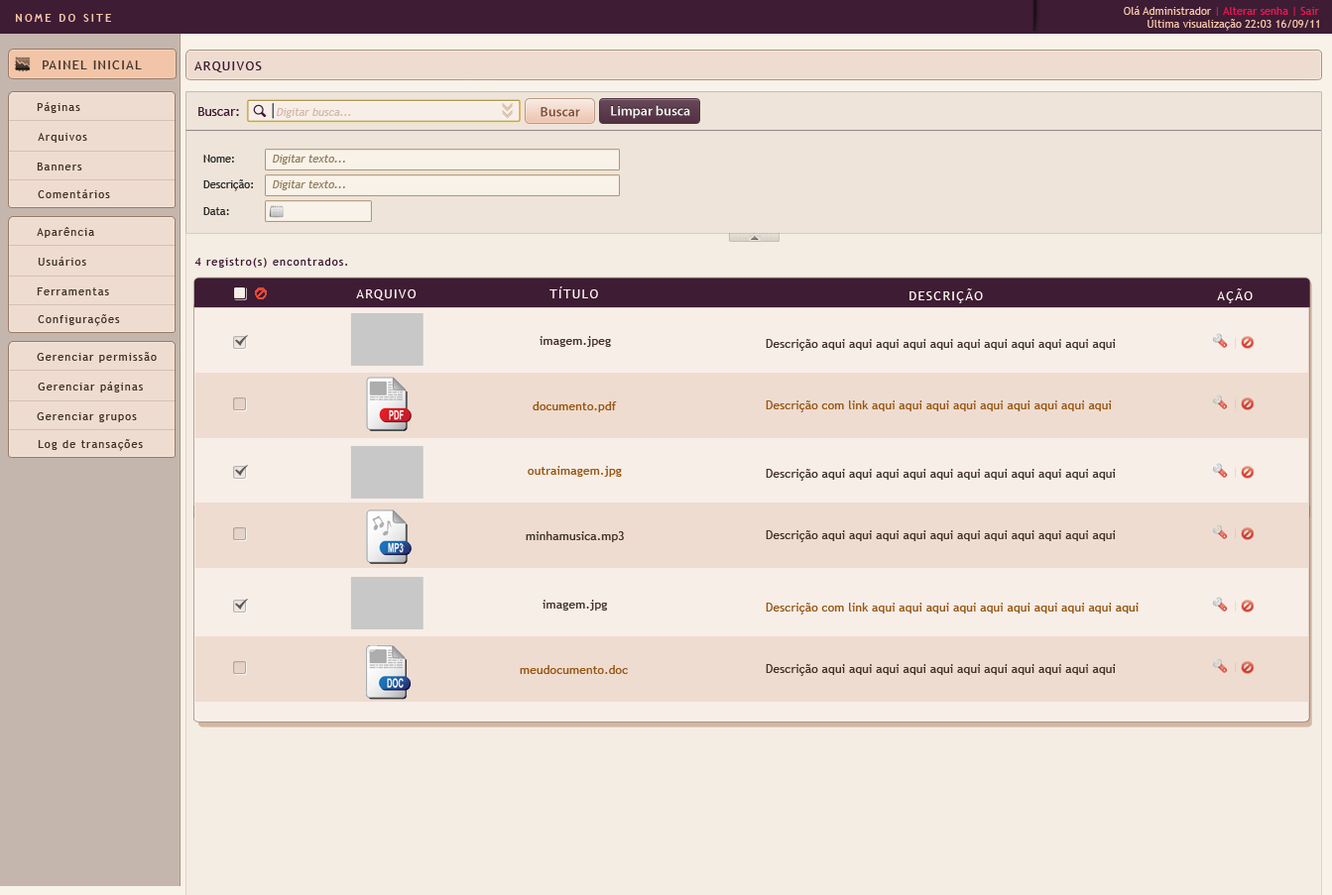
<style>
.page{position:relative;width:1332px;height:895px;background:#efdcd0}
.page>*{position:absolute;margin:0}
.t1{font:10.9px "TrebuchetMS";color:#ed1651}
.t2{font:10.9px "TrebuchetMS";color:#f3c5a8}
.t3{font:10.9px "TrebuchetMS-Bold";letter-spacing:0.2em;color:#f3c5a8;text-transform:uppercase}
.t4{font:12.9px "TrebuchetMS";letter-spacing:0.1em;color:#43342b;text-transform:uppercase}
.t5{font:12.9px "TrebuchetMS";letter-spacing:0.1em;color:#3e1c34;text-transform:uppercase}
.t6{font:10.9px "TrebuchetMS";letter-spacing:0.1em;color:#43342b}
.t7{font:12.9px "TrebuchetMS";color:#3e1c34}
.t8{font:10.9px "TrebuchetMS";color:#d2b9aa;font-style:italic}
.t9{font:13.9px "MyriadPro-Semibold";color:#7a4427}
.t10{font:13.9px "MyriadPro-Semibold";color:#ffffff}
.t11{font:10.9px "TrebuchetMS";color:#2b2b2b}
.t12{font:10.9px "TrebuchetMS";color:#938061;font-style:italic}
.t13{font:10.9px "TrebuchetMS";letter-spacing:0.1em;color:#3e1c34}
.t14{font:12.9px "TrebuchetMS";letter-spacing:0.1em;color:#fff6f0;text-transform:uppercase}
.t15{font:12.2px "TrebuchetMS";color:#43342b}
.t16{font:12.2px "TrebuchetMS";color:#975712}
</style>
<div class="page">
<p class="t1" style="left:1123px;top:6px;width:196px;height:10px"><span class="t2">Olá Administrador </span>| Alterar senha | Sair</p>
<p class="t3" style="left:15px;top:14px;width:96px;height:8px">Nome do site</p>
<p class="t2" style="left:1147px;top:17px;width:172px;height:14px">Última visualização 22:03 16/09/11</p>
<p class="t4" style="left:43px;top:60px;width:99px;height:9px">Painel Inicial</p>
<p class="t5" style="left:194px;top:61px;width:68px;height:11px">arquivos</p>
<p class="t6" style="left:37px;top:102px;width:43px;height:11px">Páginas</p>
<p class="t7" style="left:198px;top:107px;width:41px;height:9px">Buscar:</p>
<p class="t8" style="left:277px;top:108px;width:74px;height:10px">Digitar busca...</p>
<p class="t9" style="left:540px;top:107px;width:40px;height:10px">Buscar</p>
<p class="t10" style="left:611px;top:105px;width:79px;height:14px">Limpar busca</p>
<p class="t6" style="left:38px;top:133px;width:49px;height:10px">Arquivos</p>
<p class="t11" style="left:203px;top:155px;width:31px;height:8px">Nome:</p>
<p class="t12" style="left:273px;top:155px;width:72px;height:10px">Digitar texto...</p>
<p class="t6" style="left:37px;top:163px;width:45px;height:8px">Banners</p>
<p class="t11" style="left:203px;top:179px;width:50px;height:12px">Descrição:</p>
<p class="t12" style="left:273px;top:180px;width:72px;height:10px">Digitar texto...</p>
<p class="t6" style="left:38px;top:189px;width:72px;height:9px">Comentários</p>
<p class="t11" style="left:203px;top:207px;width:26px;height:8px">Data:</p>
<p class="t6" style="left:37px;top:227px;width:57px;height:11px">Aparência</p>
<p class="t6" style="left:38px;top:257px;width:48px;height:9px">Usuários</p>
<p class="t13" style="left:194px;top:258px;width:153px;height:10px">4 registro(s) encontrados.</p>
<p class="t6" style="left:37px;top:288px;width:72px;height:7px">Ferramentas</p>
<p class="t14" style="left:356px;top:290px;width:60px;height:10px">arquivo</p>
<p class="t14" style="left:549px;top:287px;width:49px;height:11px">TÍTULO</p>
<p class="t14" style="left:909px;top:289px;width:74px;height:14px">descrição</p>
<p class="t14" style="left:1217px;top:289px;width:35px;height:14px">aÇÃO</p>
<p class="t6" style="left:38px;top:314px;width:82px;height:12px">Configurações</p>
<p class="t15" style="left:539px;top:336px;width:72px;height:11px">imagem.jpeg</p>
<p class="t15" style="left:766px;top:339px;width:350px;height:12px">Descrição aqui aqui aqui aqui aqui aqui aqui aqui aqui aqui aqui</p>
<p class="t6" style="left:37px;top:352px;width:120px;height:11px">Gerenciar permissão</p>
<p class="t6" style="left:38px;top:382px;width:105px;height:11px">Gerenciar páginas</p>
<p class="t16" style="left:532px;top:402px;width:85px;height:11px">documento.pdf</p>
<p class="t16" style="left:766px;top:401px;width:346px;height:12px">Descrição com link aqui aqui aqui aqui aqui aqui aqui aqui aqui</p>
<p class="t6" style="left:37px;top:413px;width:100px;height:9px">Gerenciar grupos</p>
<p class="t6" style="left:38px;top:439px;width:105px;height:12px">Log de transações</p>
<p class="t16" style="left:528px;top:466px;width:94px;height:11px">outraimagem.jpg</p>
<p class="t15" style="left:766px;top:469px;width:350px;height:12px">Descrição aqui aqui aqui aqui aqui aqui aqui aqui aqui aqui aqui</p>
<p class="t15" style="left:526px;top:531px;width:98px;height:11px">minhamusica.mp3</p>
<p class="t15" style="left:766px;top:531px;width:350px;height:11px">Descrição aqui aqui aqui aqui aqui aqui aqui aqui aqui aqui aqui</p>
<p class="t15" style="left:542px;top:600px;width:65px;height:11px">imagem.jpg</p>
<p class="t16" style="left:766px;top:603px;width:372px;height:12px">Descrição com link aqui aqui aqui aqui aqui aqui aqui aqui aqui aqui</p>
<p class="t16" style="left:520px;top:665px;width:108px;height:9px">meudocumento.doc</p>
<p class="t15" style="left:766px;top:664px;width:350px;height:12px">Descrição aqui aqui aqui aqui aqui aqui aqui aqui aqui aqui aqui</p>
</div>
